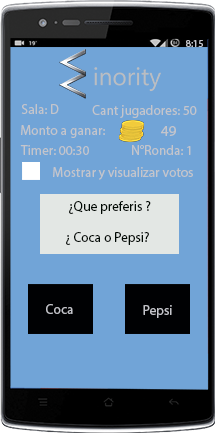
<style>
.page{position:relative;width:215px;height:433px;background:#71a4d7}
.page>*{position:absolute;margin:0}
.t1{font:10px "MyriadPro-Regular";color:#c4c5cb}
.t2{font:13.5px "MyriadPro-Regular";color:#c4c5cb}
.t3{font:15px "MyriadPro-Regular";color:#c4c5cb}
.t4{font:13.5px "MyriadPro-Regular";color:#000903}
</style>
<div class="page">
<p class="t1" style="left:186px;top:40px;width:17px;height:7px">8:15</p>
<p class="t2" style="left:21px;top:104px;width:38px;height:10px">Sala: D</p>
<p class="t2" style="left:92px;top:105px;width:105px;height:13px">Cant jugadores: 50</p>
<p class="t2" style="left:21px;top:125px;width:84px;height:13px">Monto a ganar:</p>
<p class="t3" style="left:161px;top:126px;width:15px;height:10px">49</p>
<p class="t2" style="left:20px;top:145px;width:69px;height:10px">Timer: 00:30</p>
<p class="t2" style="left:132px;top:145px;width:59px;height:10px">N°Ronda: 1</p>
<p class="t2" style="left:53px;top:167px;width:140px;height:13px">Mostrar y visualizar votos</p>
<p class="t4" style="left:69px;top:201px;width:82px;height:13px">¿Que preferis ?</p>
<p class="t4" style="left:66px;top:232px;width:83px;height:13px">¿ Coca o Pepsi?</p>
<p class="t2" style="left:46px;top:304px;width:27px;height:10px">Coca</p>
<p class="t2" style="left:143px;top:305px;width:29px;height:13px">Pepsi</p>
</div>
